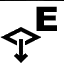
<style>
.page{position:relative;width:64px;height:64px;background:#ffffff}
.page>*{position:absolute;margin:0}
.t1{font:34px "Arial-Black";color:#000000}
</style>
<div class="page">
<p class="t1" style="left:36px;top:5px;width:21px;height:25px">E</p>
</div>
